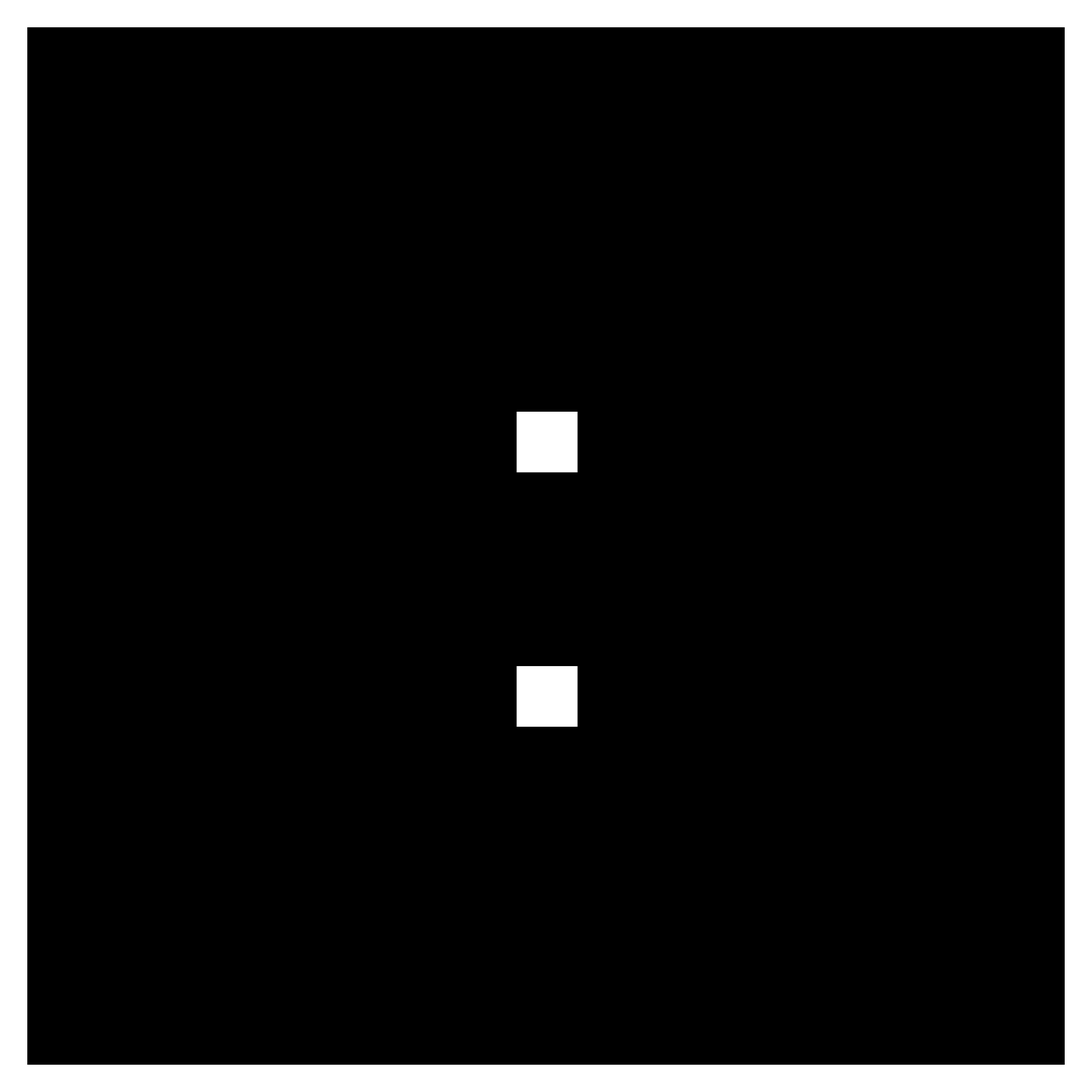
<style>
.page{position:relative;width:1092px;height:1092px;background:#000000}
.page>*{position:absolute;margin:0}
.t1{font:606.7px "ArialMT";color:#ffffff}
</style>
<div class="page">
<p class="t1" style="left:517px;top:412px;width:61px;height:315px">:</p>
</div>
